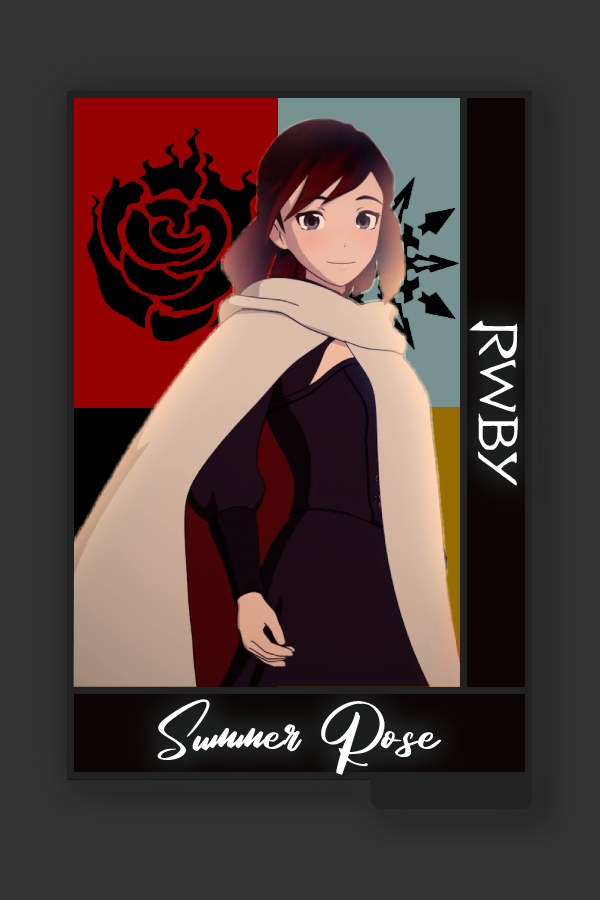
<style>
.page{position:relative;width:600px;height:900px;background:#333333}
.page>*{position:absolute;margin:0}
.t1{font:61.3px "RWBY_Style";color:#ffffff;scale:1.25 1}
.t2{font:76.6px "RosegaFREE";color:#ffffff;scale:0.91 1}
</style>
<div class="page">
<p class="t1" style="left:469px;top:320px;width:49px;height:166px;rotate:90deg">RWBY</p>
<p class="t2" style="left:147px;top:684px;width:295px;height:92px">Summer Rose</p>
</div>
